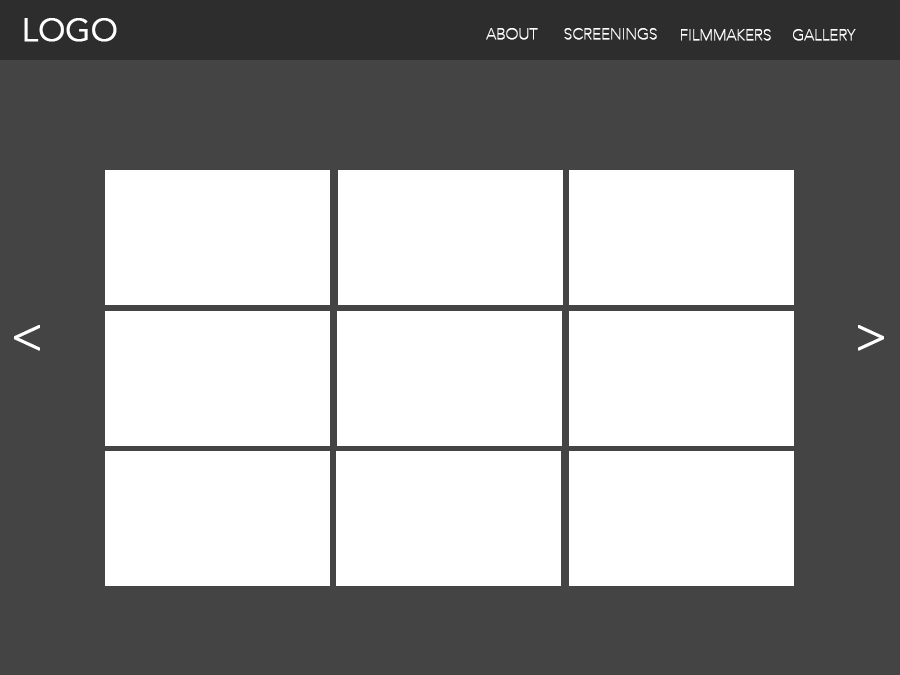
<style>
.page{position:relative;width:900px;height:675px;background:#ffffff}
.page>*{position:absolute;margin:0}
.t1{font:54.2px "Avenir-Light";letter-spacing:-0.005em;color:#ffffff;font-weight:bold}
.t2{font:25px "AvenirNext-UltraLight";letter-spacing:-0.005em;color:#ffffff;font-weight:bold}
.t3{font:83.3px "Avenir-Light";letter-spacing:-0.005em;color:#ffffff;font-weight:bold}
</style>
<div class="page">
<p class="t1" style="left:24px;top:18px;width:93px;height:24px">LOGO</p>
<p class="t2" style="left:486px;top:28px;width:52px;height:12px">ABOUT</p>
<p class="t2" style="left:564px;top:28px;width:93px;height:12px">SCREENINGS</p>
<p class="t2" style="left:681px;top:29px;width:90px;height:12px">FILMMAKERS</p>
<p class="t2" style="left:793px;top:29px;width:63px;height:12px">GALLERY</p>
<p class="t3" style="left:14px;top:325px;width:26px;height:26px">&lt;</p>
<p class="t3" style="left:858px;top:325px;width:26px;height:26px">&gt;</p>
</div>
